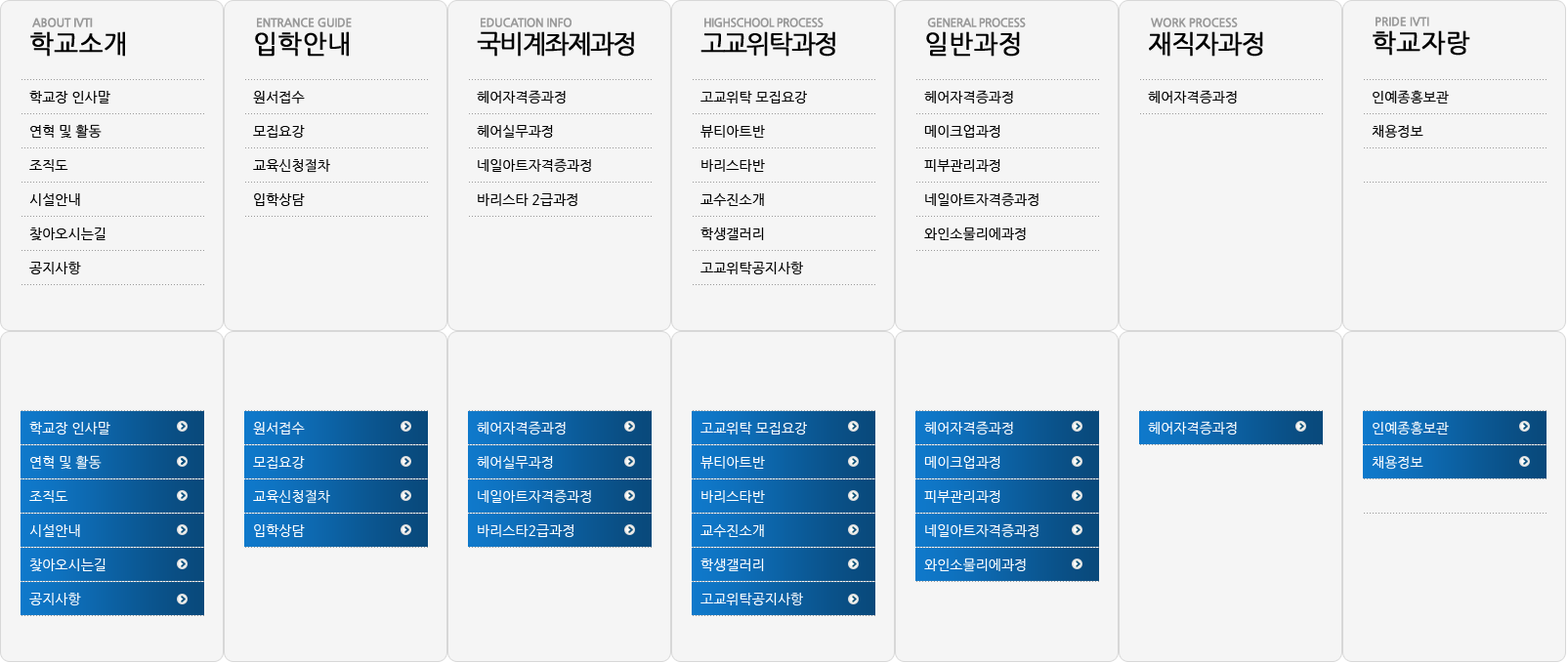
<style>
.page{position:relative;width:1568px;height:663px;background:#f5f5f5}
.page>*{position:absolute;margin:0}
.t1{font:11.7px "NanumGothicBold";letter-spacing:-0.025em;color:#999999}
.t2{font:11.7px "NanumGothicBold";letter-spacing:-0.05em;color:#999999}
.t3{font:11.7px "NanumGothicBold";letter-spacing:-0.005em;color:#999999}
.t4{font:25.4px "NanumGothic";color:#000000;font-weight:bold}
.t5{font:25.4px "NanumGothic";letter-spacing:-0.075em;color:#000000;font-weight:bold}
.t6{font:25.4px "NanumGothic";letter-spacing:-0.05em;color:#000000;font-weight:bold}
.t7{font:13.7px/34.2px "NanumGothic";color:#000000}
.t8{font:13.7px "NanumGothic";color:#000000}
.t9{font:13.7px/34.2px "NanumGothic";color:#ffffff}
.t10{font:13.7px "NanumGothic";color:#ffffff}
</style>
<div class="page">
<p class="t1" style="left:32px;top:18px;width:61px;height:9px">ABOUT IVTI</p>
<p class="t1" style="left:257px;top:18px;width:95px;height:9px">ENTRANCE GUIDE</p>
<p class="t1" style="left:481px;top:18px;width:91px;height:9px">EDUCATION INFO</p>
<p class="t2" style="left:704px;top:18px;width:120px;height:9px">HIGHSCHOOL PROCESS</p>
<p class="t2" style="left:927px;top:18px;width:99px;height:9px">GENERAL PROCESS</p>
<p class="t1" style="left:1151px;top:18px;width:87px;height:9px">WORK PROCESS</p>
<p class="t3" style="left:1376px;top:17px;width:53px;height:9px">PRIDE IVTI</p>
<p class="t4" style="left:30px;top:31px;width:95px;height:26px">학교소개</p>
<p class="t4" style="left:255px;top:31px;width:94px;height:26px">입학안내</p>
<p class="t5" style="left:477px;top:31px;width:157px;height:26px">국비계좌제과정</p>
<p class="t5" style="left:700px;top:31px;width:135px;height:26px">고교위탁과정</p>
<p class="t4" style="left:926px;top:31px;width:94px;height:26px">일반과정</p>
<p class="t6" style="left:1149px;top:31px;width:114px;height:26px">재직자과정</p>
<p class="t4" style="left:1373px;top:30px;width:97px;height:26px">학교자랑</p>
<p class="t7" style="left:477px;top:90px;width:114px;height:116px">헤어자격증과정<br>헤어실무과정<br>네일아트자격증과정<br>바리스타 2급과정</p>
<p class="t7" style="left:924px;top:90px;width:114px;height:151px">헤어자격증과정<br>메이크업과정<br>피부관리과정<br>네일아트자격증과정<br>와인소물리에과정</p>
<p class="t8" style="left:1148px;top:90px;width:89px;height:15px">헤어자격증과정</p>
<p class="t7" style="left:1372px;top:90px;width:77px;height:49px">인예종홍보관<br>채용정보</p>
<p class="t7" style="left:29px;top:91px;width:81px;height:184px">학교장 인사말<br>연혁 및 활동<br>조직도<br>시설안내<br>찾아오시는길<br>공지사항</p>
<p class="t7" style="left:253px;top:91px;width:77px;height:115px">원서접수<br>모집요강<br>교육신청절차<br>입학상담</p>
<p class="t7" style="left:700px;top:91px;width:107px;height:184px">고교위탁 모집요강<br>뷰티아트반<br>바리스타반<br>교수진소개<br>학생갤러리<br>고교위탁공지사항</p>
<p class="t9" style="left:29px;top:422px;width:81px;height:185px">학교장 인사말<br>연혁 및 활동<br>조직도<br>시설안내<br>찾아오시는길<br>공지사항</p>
<p class="t9" style="left:253px;top:422px;width:77px;height:115px">원서접수<br>모집요강<br>교육신청절차<br>입학상담</p>
<p class="t9" style="left:477px;top:421px;width:114px;height:116px">헤어자격증과정<br>헤어실무과정<br>네일아트자격증과정<br>바리스타2급과정</p>
<p class="t9" style="left:700px;top:422px;width:107px;height:185px">고교위탁 모집요강<br>뷰티아트반<br>바리스타반<br>교수진소개<br>학생갤러리<br>고교위탁공지사항</p>
<p class="t9" style="left:924px;top:421px;width:114px;height:151px">헤어자격증과정<br>메이크업과정<br>피부관리과정<br>네일아트자격증과정<br>와인소물리에과정</p>
<p class="t10" style="left:1148px;top:421px;width:89px;height:15px">헤어자격증과정</p>
<p class="t9" style="left:1372px;top:421px;width:77px;height:49px">인예종홍보관<br>채용정보</p>
</div>
